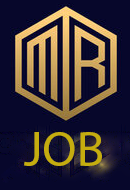
<style>
.page{position:relative;width:130px;height:190px;background:#07072b}
.page>*{position:absolute;margin:0}
.t1{font:50px "MyriadPro-Regular";color:#c5ad0f}
</style>
<div class="page">
<p class="t1" style="left:24px;top:132px;width:78px;height:34px">JOB</p>
</div>
